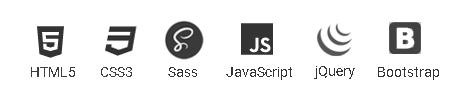
<style>
.page{position:relative;width:459px;height:97px;background:#ffffff}
.page>*{position:absolute;margin:0}
.t1{font:14px "Roboto-Regular";color:#3d3d3d}
.t2{font:14px "Roboto-Regular";color:#333333}
</style>
<div class="page">
<p class="t1" style="left:31px;top:67px;width:44px;height:10px">HTML5</p>
<p class="t1" style="left:101px;top:67px;width:31px;height:10px">CSS3</p>
<p class="t2" style="left:168px;top:67px;width:29px;height:10px">Sass</p>
<p class="t2" style="left:226px;top:67px;width:66px;height:13px">JavaScript</p>
<p class="t2" style="left:314px;top:66px;width:41px;height:13px">jQuery</p>
<p class="t2" style="left:378px;top:67px;width:61px;height:13px">Bootstrap</p>
</div>
